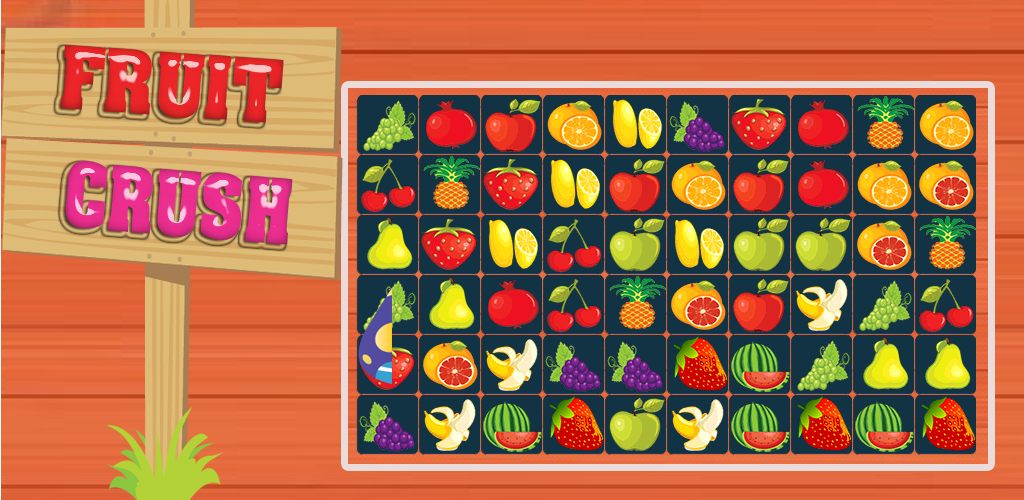
<style>
.page{position:relative;width:1024px;height:500px}
.page>*{position:absolute;margin:0}
.t1{font:97.6px "VNI-Auchon-Bold";color:#ea2427;scale:0.88 1}
.t2{font:100.5px "VNI-Auchon-Bold";color:#eb2d8e;scale:0.79 1}
</style>
<div class="page">
<p class="t1" style="left:60px;top:44px;width:224px;height:79px;rotate:4deg">FRUIT</p>
<p class="t2" style="left:65px;top:160px;width:228px;height:85px;rotate:5deg">CRUSH</p>
</div>
